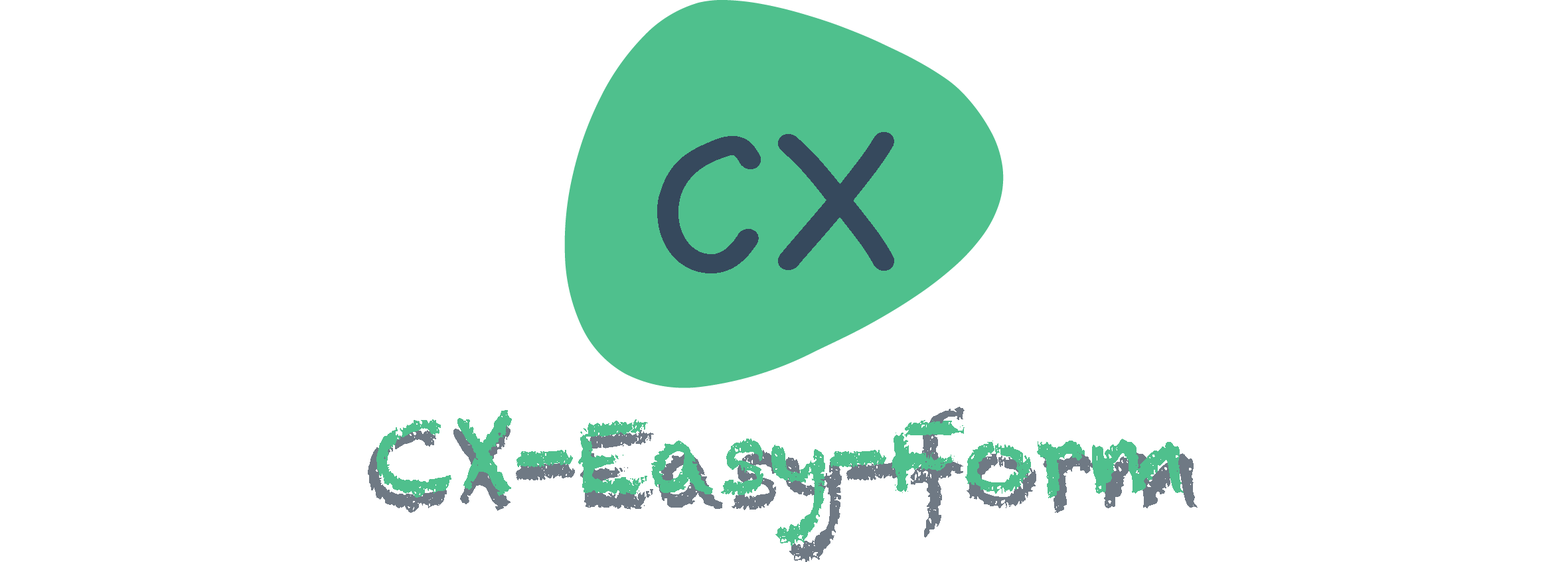
<style>
.page{position:relative;width:1568px;height:562px;background:#ffffff}
.page>*{position:absolute;margin:0}
.t1{font:199.2px "ChalkboardSE-Regular";color:#36495d}
.t2{font:99.6px "Chalkduster";color:#4fc08d}
</style>
<div class="page">
<p class="t1" style="left:657px;top:132px;width:237px;height:142px">CX</p>
<p class="t2" style="left:376px;top:410px;width:808px;height:136px">CX-Easy-Form</p>
</div>
